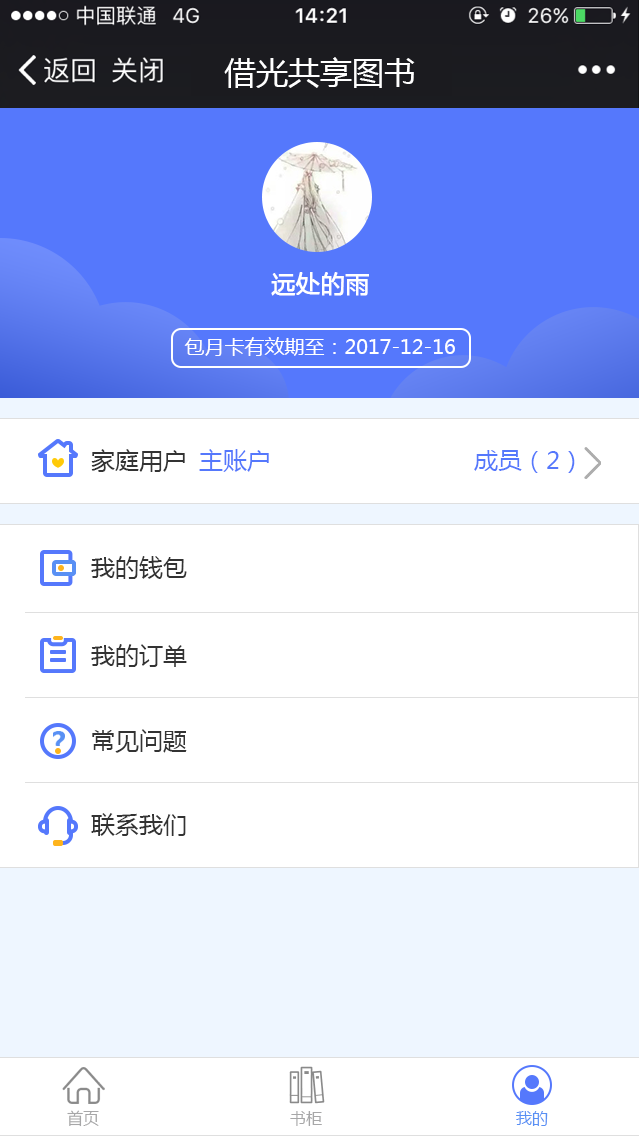
<style>
.page{position:relative;width:639px;height:1136px;background:#ffffff}
.page>*{position:absolute;margin:0}
.t1{font:32px "MicrosoftYaHei";color:#ffffff}
.t2{font:24px "MicrosoftYaHei";color:#ffffff;font-weight:bold}
.t3{font:20px "MicrosoftYaHei";color:#ffffff}
.t4{font:24px "MicrosoftYaHei";color:#333333}
.t5{font:24px "MicrosoftYaHei";color:#5578fc}
.t6{font:16px "MicrosoftYaHei";color:#a7a7a8}
.t7{font:16px "MicrosoftYaHei";color:#5990f4}
</style>
<div class="page">
<p class="t1" style="left:224px;top:57px;width:191px;height:31px">借光共享图书</p>
<p class="t2" style="left:271px;top:272px;width:98px;height:24px">远处的雨</p>
<p class="t3" style="left:184px;top:337px;width:271px;height:19px">包月卡有效期至：2017-12-16</p>
<p class="t4" style="left:91px;top:449px;width:94px;height:23px">家庭用户</p>
<p class="t5" style="left:199px;top:449px;width:70px;height:23px">主账户</p>
<p class="t5" style="left:474px;top:450px;width:101px;height:23px">成员（2）</p>
<p class="t4" style="left:91px;top:556px;width:96px;height:23px">我的钱包</p>
<p class="t4" style="left:91px;top:644px;width:96px;height:23px">我的订单</p>
<p class="t4" style="left:92px;top:729px;width:95px;height:24px">常见问题</p>
<p class="t4" style="left:91px;top:813px;width:95px;height:23px">联系我们</p>
<p class="t6" style="left:67px;top:1110px;width:32px;height:17px">首页</p>
<p class="t6" style="left:290px;top:1111px;width:32px;height:15px">书柜</p>
<p class="t7" style="left:516px;top:1111px;width:32px;height:15px">我的</p>
</div>
